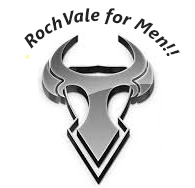
<style>
.page{position:relative;width:195px;height:188px;background:#ffffff}
.page>*{position:absolute;margin:0}
.t1{font:18px "SegoeUI-BoldItalic";color:#222222}
.t2{font:6px "SegoePrint-Bold";color:#fff799}
</style>
<div class="page">
<p class="t1" style="left:24px;top:8px;width:156px;height:48px">RochVale for Men!!</p>
<p class="t2" style="left:25px;top:54px;width:5px;height:6px">R</p>
</div>
